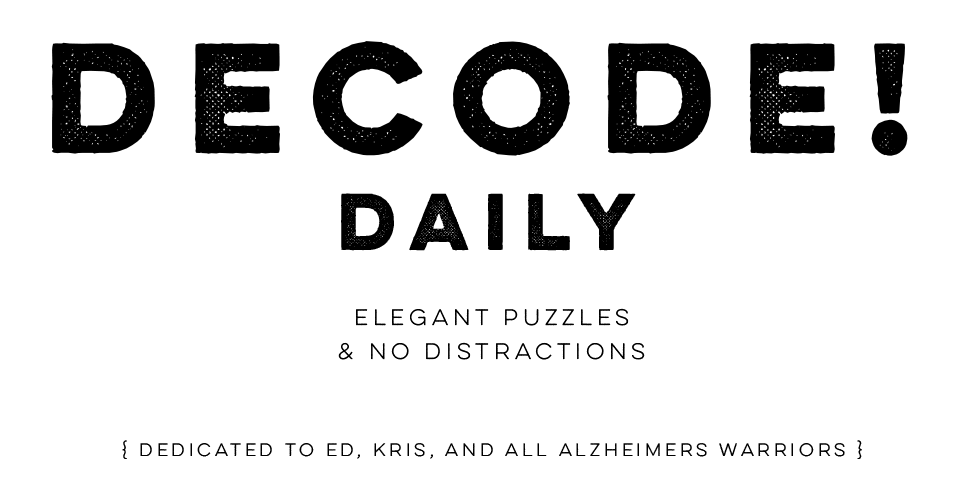
<style>
.page{position:relative;width:957px;height:484px;background:#ffffff}
.page>*{position:absolute;margin:0}
.t1{font:16px "LuloOne";color:#000000}
.t2{font:140px "LuloOne-Bold";letter-spacing:-0.02em;color:#000000}
.t3{font:140px "LuloOne-Bold";color:#000000}
.t4{font:72px "LuloOne-Bold";color:#000000}
.t5{font:20px "LuloOne";color:#000000}
</style>
<div class="page">
<p class="t1" style="left:51px;top:41px;width:857px;height:418px;text-align:center"><span class="t2">decode</span><span class="t3">!<br></span><span class="t4">daily<br><br></span><span class="t5">elegant puzzles<br>&amp; No distractionS<br><br><br></span>{ dedicated to Ed, Kris, and AlL alzheimers warriors }</p>
</div>
